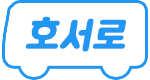
<style>
.page{position:relative;width:150px;height:80px;background:#ffffff}
.page>*{position:absolute;margin:0}
.t1{font:40px "BMJUA";color:#2196f3;font-weight:bold;font-style:italic}
</style>
<div class="page">
<p class="t1" style="left:25px;top:16px;width:101px;height:36px">호서로</p>
</div>
